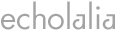
<style>
.page{position:relative;width:117px;height:30px;background:#ffffff}
.page>*{position:absolute;margin:0}
.t1{font:36px "RennerArchiType";color:#a3a3a3}
</style>
<div class="page">
<p class="t1" style="left:1px;top:1px;width:114px;height:29px">echol∑li∑</p>
</div>
